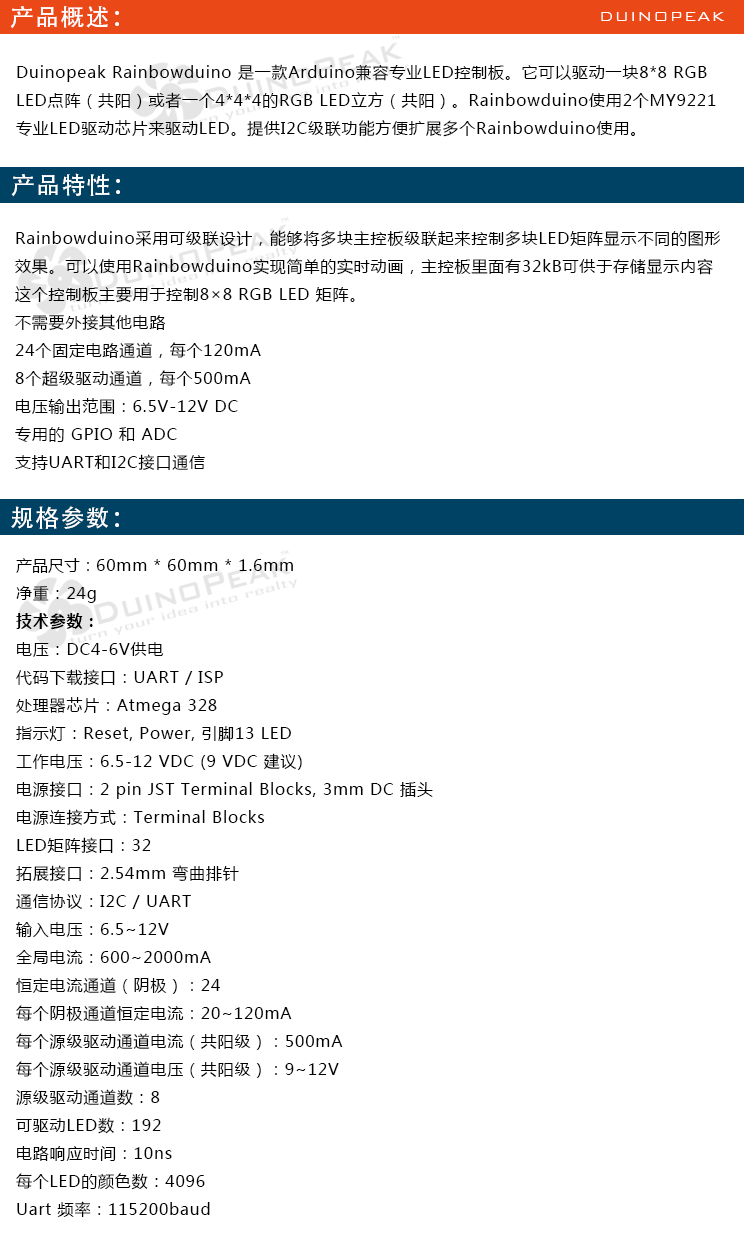
<style>
.page{position:relative;width:744px;height:1238px;background:#ffffff}
.page>*{position:absolute;margin:0}
.t1{font:24px "AdobeHeitiStd-Regular";letter-spacing:0.05em;color:#ffffff}
.t2{font:18px "BankGothicBT-Light";letter-spacing:0.05em;color:#ffffff}
.t3{font:16px "MicrosoftYaHei";letter-spacing:0.05em;color:#000000}
.t4{font:16px "MicrosoftYaHei";color:#000000}
.t5{font:16px "MicrosoftYaHei-Bold";letter-spacing:0.05em;color:#000000}
</style>
<div class="page">
<p class="t1" style="left:10px;top:6px;width:109px;height:23px">产品概述：</p>
<p class="t2" style="left:601px;top:12px;width:124px;height:9px">DUINOPEAK</p>
<p class="t3" style="left:16px;top:64px;width:700px;height:73px">Duinopeak Rainbowduino 是一款Arduino兼容专业LED控制板。它可以驱动一块8*8 RGB <br>LED点阵（共阳）或者一个4*4*4的RGB LED立方（共阳）。Rainbowduino使用2个MY9221<br>专业LED驱动芯片来驱动LED。提供I2C级联功能方便扩展多个Rainbowduino使用。</p>
<p class="t1" style="left:11px;top:173px;width:109px;height:24px">产品特性：</p>
<p class="t3" style="left:15px;top:230px;width:705px;height:240px">Rainbowduino采用可级联设计，能够将多块主控板级联起来控制多块LED矩阵显示不同的图形<br>效果。可以使用Rainbowduino实现简单的实时动画，主控板里面有32kB可供于存储显示内容<br>这个控制板主要用于控制8×8 RGB LED 矩阵。<br>不需要外接其他电路<br>24个固定电路通道，每个120mA<br>8个超级驱动通道，每个500mA<br>电压输出范围：6.5V-12V DC<br>专用的 GPIO 和 ADC<br>支持UART和I2C接口通信</p>
<p class="t1" style="left:11px;top:506px;width:108px;height:23px">规格参数：</p>
<p class="t3" style="left:16px;top:558px;width:417px;height:660px"><span class="t4">产品尺寸：</span>60mm * 60mm * 1.6mm<br>净重：24g<br><span class="t5">技术参数：<br></span>电压：DC4-6V供电<br>代码下载接口：UART / ISP<br>处理器芯片：Atmega 328<br>指示灯：Reset, Power, 引脚13 LED<br>工作电压：6.5-12 VDC (9 VDC 建议)<br>电源接口：2 pin JST Terminal Blocks, 3mm DC 插头<br>电源连接方式：Terminal Blocks<br>LED矩阵接口：32<br>拓展接口：2.54mm 弯曲排针<br>通信协议：I2C / UART<br>输入电压：6.5~12V<br>全局电流：600~2000mA<br>恒定电流通道（阴极）：24<br>每个阴极通道恒定电流：20~120mA<br>每个源级驱动通道电流（共阳级）：500mA<br>每个源级驱动通道电压（共阳级）：9~12V<br>源级驱动通道数：8<br>可驱动LED数：192<br>电路响应时间：10ns<br>每个LED的颜色数：4096<br>Uart 频率：115200baud</p>
</div>
